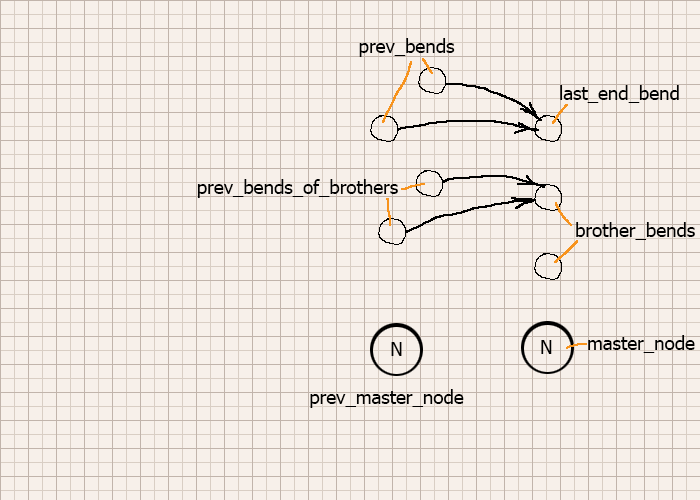
<style>
.page{position:relative;width:700px;height:500px;background:#f7f0ea}
.page>*{position:absolute;margin:0}
.t1{font:18.8px "Tahoma";color:#000000}
</style>
<div class="page">
<p class="t1" style="left:359px;top:38px;width:96px;height:19px">prev_bends</p>
<p class="t1" style="left:560px;top:85px;width:119px;height:18px">last_end_bend</p>
<p class="t1" style="left:197px;top:179px;width:201px;height:19px">prev_bends_of_brothers</p>
<p class="t1" style="left:576px;top:222px;width:119px;height:18px">brother_bends</p>
<p class="t1" style="left:391px;top:342px;width:11px;height:14px">N</p>
<p class="t1" style="left:541px;top:340px;width:11px;height:14px">N</p>
<p class="t1" style="left:588px;top:335px;width:107px;height:18px">master_node</p>
<p class="t1" style="left:310px;top:389px;width:154px;height:19px">prev_master_node</p>
</div>
